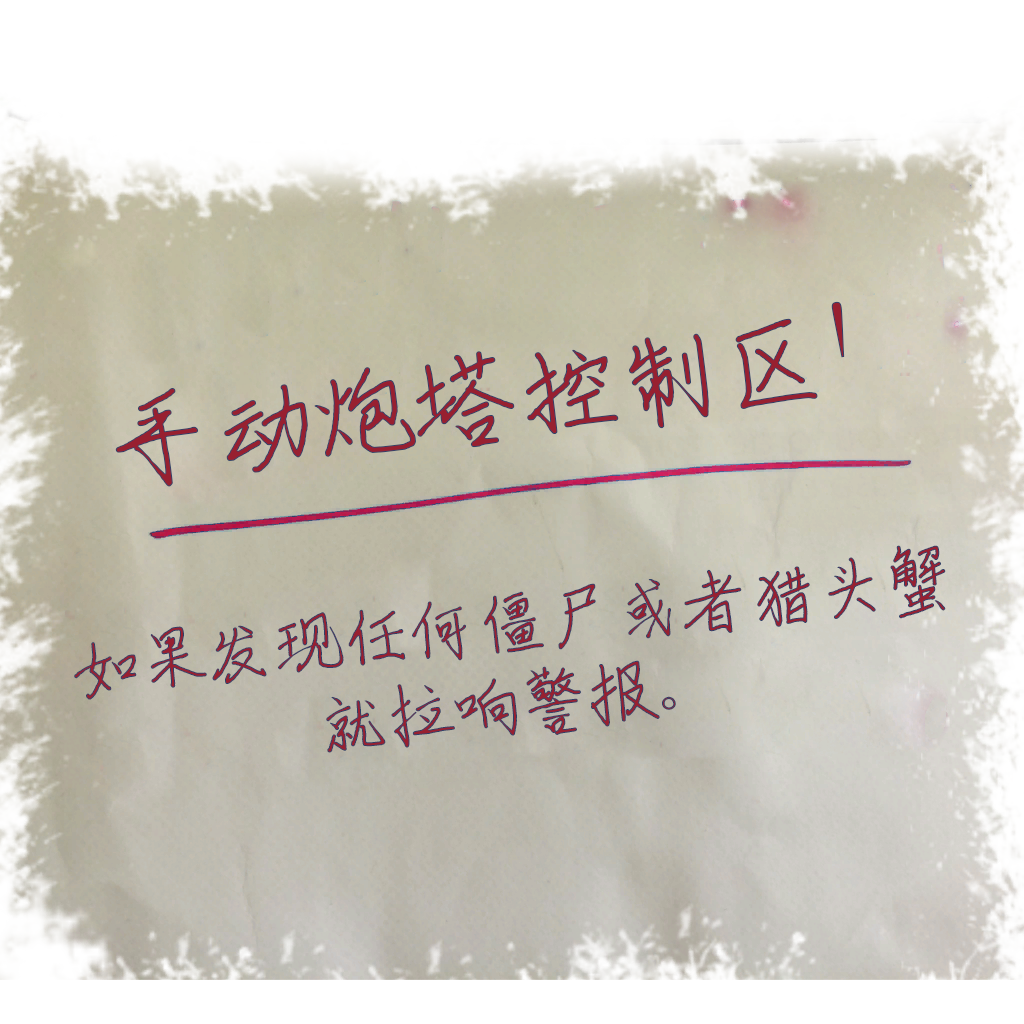
<style>
.page{position:relative;width:1024px;height:1024px}
.page>*{position:absolute;margin:0}
.t1{font:113.8px "ShouShuti";letter-spacing:-0.1em;color:#982030}
.t2{font:75.6px/81.1px "ShouShuti";letter-spacing:-0.1em}
</style>
<div class="page">
<p class="t1" style="left:115px;top:301px;width:730px;height:186px;rotate:-7deg">手动炮塔控制区！</p>
<p class="t2" style="left:74px;top:545px;width:872px;height:208px;text-align:center;rotate:-6deg">如果发现任何僵尸或者猎头蟹<br>就拉响警报。</p>
</div>
